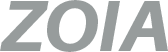
<style>
.page{position:relative;width:168px;height:52px;background:#ffffff}
.page>*{position:absolute;margin:0}
.t1{font:72px "Aileron-HeavyItalic";color:#979c9c}
</style>
<div class="page">
<p class="t1" style="left:0px;top:0px;width:168px;height:52px">ZOIA</p>
</div>
